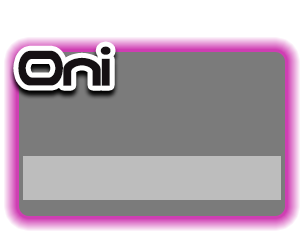
<style>
.page{position:relative;width:300px;height:240px;background:#7b7b7b}
.page>*{position:absolute;margin:0}
.t1{font:60px "NicoKaku";letter-spacing:-0.1em;color:#151013}
</style>
<div class="page">
<p class="t1" style="left:18px;top:46px;width:93px;height:40px">Oni</p>
</div>
